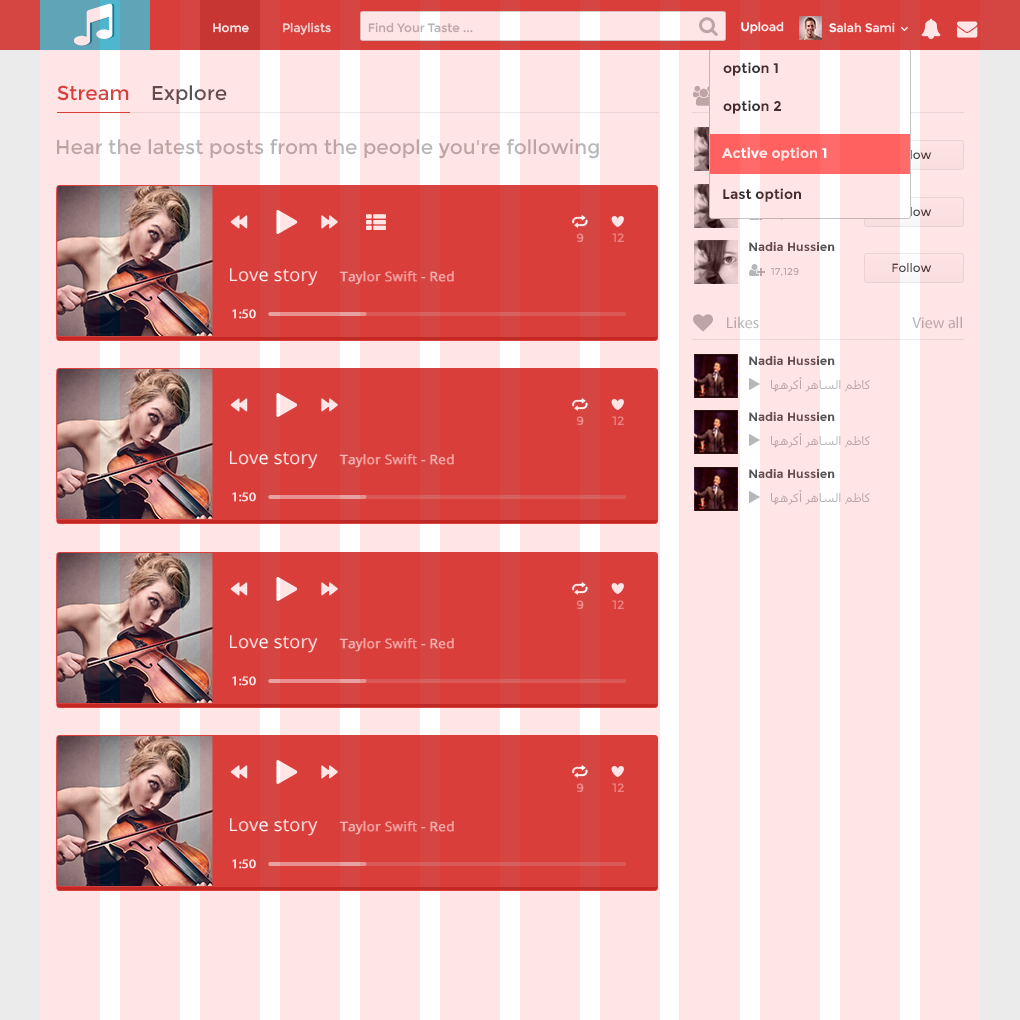
<style>
.page{position:relative;width:1020px;height:1020px;background:#ffe5e5}
.page>*{position:absolute;margin:0}
.t1{font:12px "Montserrat-Regular";color:#ffe5e5}
.t2{font:12px "Montserrat-Regular";color:#edd3d3}
.t3{font:12px "Montserrat-Regular";color:#b7b7b7}
.t4{font:12px "Montserrat-Regular"}
.t5{font:14px "Montserrat-Bold";color:#333333}
.t6{font:20px "Montserrat-Regular";color:#d54542}
.t7{font:20px "Montserrat-Regular";color:#555555}
.t8{font:20px "Montserrat-Regular";color:#b7b7b7}
.t9{font:14px "Montserrat-Bold";color:#ffe5e5}
.t10{font:12px "Montserrat-Regular";color:#eb9594;scale:1.03 1}
.t11{font:12px "Montserrat-Bold";color:#555555}
.t12{font:13px "OpenSans";color:#f3b5b4;font-weight:bold;scale:1.03 1}
.t13{font:18px "OpenSans";color:#ffffff;scale:1.03 1}
.t14{font:10px "Montserrat-Regular";color:#b7b7b7}
.t15{font:12px "Montserrat-Regular";color:#444444}
.t16{font:13px "MyriadPro-Regular";color:#ffe5e5;font-weight:bold;scale:1.03 1}
.t17{font:16px "MyriadPro-Regular";color:#b7b7b7}
.t18{font:12px "Tahoma";color:#b7b7b7}
</style>
<div class="page">
<p class="t1" style="left:213px;top:23px;width:36px;height:10px">Home</p>
<p class="t2" style="left:283px;top:22px;width:48px;height:13px">Playlists</p>
<p class="t3" style="left:368px;top:22px;width:105px;height:11px">Find Your Taste ...</p>
<p class="t4" style="left:741px;top:21px;width:43px;height:13px">Upload</p>
<p class="t1" style="left:829px;top:22px;width:66px;height:11px">Salah Sami</p>
<p class="t5" style="left:723px;top:62px;width:55px;height:14px">option 1</p>
<p class="t6" style="left:57px;top:85px;width:72px;height:16px">Stream</p>
<p class="t7" style="left:152px;top:85px;width:75px;height:19px">Explore</p>
<p class="t5" style="left:723px;top:100px;width:58px;height:14px">option 2</p>
<p class="t8" style="left:57px;top:138px;width:542px;height:21px">Hear the latest posts from the people you're following</p>
<p class="t9" style="left:722px;top:147px;width:105px;height:14px">Active option 1</p>
<p class="t4" style="left:892px;top:150px;width:40px;height:9px">Follow</p>
<p class="t5" style="left:723px;top:188px;width:78px;height:14px">Last option</p>
<p class="t4" style="left:892px;top:207px;width:40px;height:9px">Follow</p>
<p class="t10" style="left:577px;top:233px;width:7px;height:9px">9</p>
<p class="t10" style="left:612px;top:233px;width:12px;height:9px">12</p>
<p class="t11" style="left:749px;top:242px;width:86px;height:9px">Nadia Hussien</p>
<p class="t12" style="left:230px;top:268px;width:224px;height:18px"><span class="t13">Love story </span>Taylor Swift - Red</p>
<p class="t14" style="left:771px;top:267px;width:28px;height:9px">17,129</p>
<p class="t15" style="left:892px;top:263px;width:40px;height:9px">Follow</p>
<p class="t16" style="left:232px;top:309px;width:24px;height:10px">1:50</p>
<p class="t17" style="left:727px;top:316px;width:32px;height:13px">Likes</p>
<p class="t17" style="left:912px;top:316px;width:50px;height:13px">View all</p>
<p class="t11" style="left:749px;top:356px;width:86px;height:9px">Nadia Hussien</p>
<p class="t18" style="left:771px;top:377px;width:99px;height:15px">كاظم الساهر أكرهها</p>
<p class="t11" style="left:749px;top:412px;width:86px;height:9px">Nadia Hussien</p>
<p class="t10" style="left:577px;top:416px;width:7px;height:9px">9</p>
<p class="t10" style="left:612px;top:416px;width:12px;height:9px">12</p>
<p class="t18" style="left:771px;top:433px;width:99px;height:15px">كاظم الساهر أكرهها</p>
<p class="t12" style="left:230px;top:451px;width:224px;height:18px"><span class="t13">Love story </span>Taylor Swift - Red</p>
<p class="t11" style="left:749px;top:469px;width:86px;height:9px">Nadia Hussien</p>
<p class="t16" style="left:232px;top:492px;width:24px;height:10px">1:50</p>
<p class="t18" style="left:771px;top:490px;width:99px;height:15px">كاظم الساهر أكرهها</p>
<p class="t10" style="left:577px;top:600px;width:7px;height:9px">9</p>
<p class="t10" style="left:612px;top:600px;width:12px;height:9px">12</p>
<p class="t12" style="left:230px;top:635px;width:224px;height:18px"><span class="t13">Love story </span>Taylor Swift - Red</p>
<p class="t16" style="left:232px;top:676px;width:24px;height:10px">1:50</p>
<p class="t10" style="left:577px;top:783px;width:7px;height:9px">9</p>
<p class="t10" style="left:612px;top:783px;width:12px;height:9px">12</p>
<p class="t12" style="left:230px;top:818px;width:224px;height:18px"><span class="t13">Love story </span>Taylor Swift - Red</p>
<p class="t16" style="left:232px;top:859px;width:24px;height:10px">1:50</p>
</div>
